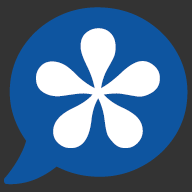
<style>
.page{position:relative;width:192px;height:192px;background:#0e55a0}
.page>*{position:absolute;margin:0}
.t1{font:295.5px "BodoniMT-Bold";letter-spacing:-0.01em;color:#ffffff}
</style>
<div class="page">
<p class="t1" style="left:36px;top:28px;width:124px;height:120px">*</p>
</div>
